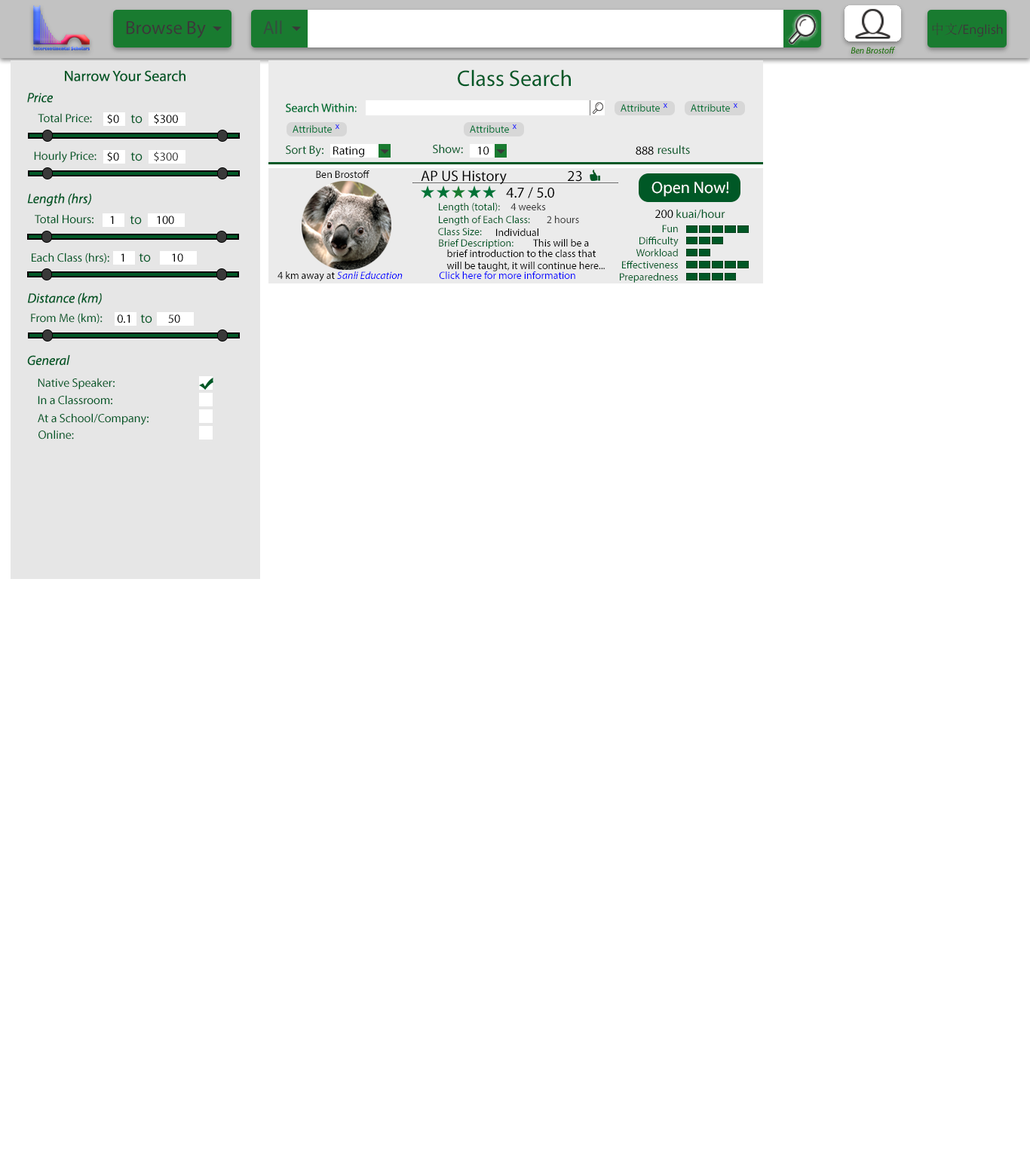
<style>
.page{position:relative;width:1030px;height:1158px;background:#ffffff}
.page>*{position:absolute;margin:0}
.t1{font:18.8px "MyriadPro-Regular";color:#393939}
.t2{font:18.8px "MyriadPro-Regular";color:#334d3e}
.t3{font:13.6px "MyriadPro-Regular";color:#393939}
.t4{font:13.6px "SimSun";color:#393939}
.t5{font:9px "MyriadPro-It";color:#126b00}
.t6{font:15.1px "MyriadPro-Regular";color:#005826}
.t7{font:22.6px "MyriadPro-Regular";color:#005826}
.t8{font:13.6px "MyriadPro-It";color:#005826}
.t9{font:12.1px "MyriadPro-Regular";color:#005826}
.t10{font:12.1px "MyriadPro-Regular";color:#000000}
.t11{font:12.1px "MyriadPro-Regular";color:#007236}
.t12{font:10.6px "MyriadPro-Regular";color:#007236}
.t13{font:9px "MyriadPro-Regular"}
.t14{font:13.6px "MyriadPro-Regular";color:#005826}
.t15{font:12.1px "MyriadPro-Regular";color:#393939}
.t16{font:10.6px "MyriadPro-Regular";color:#000000}
.t17{font:15.1px "MyriadPro-Regular";color:#000000}
.t18{font:16.6px "MyriadPro-Regular";color:#ffffff}
.t19{font:10.6px "MyriadPro-Regular";color:#005826}
.t20{font:10.6px "MyriadPro-Regular";color:#393939}
.t21{font:10.6px "MyriadPro-It";color:#0000ff}
.t22{font:10.6px "MyriadPro-Regular";color:#0000ff}
</style>
<div class="page">
<p class="t1" style="left:126px;top:21px;width:80px;height:17px">Browse By</p>
<p class="t2" style="left:263px;top:20px;width:19px;height:14px">All</p>
<p class="t3" style="left:932px;top:23px;width:71px;height:14px"><span class="t4">中文</span>/English</p>
<p class="t5" style="left:850px;top:47px;width:46px;height:7px">Ben Brostoff</p>
<p class="t6" style="left:65px;top:70px;width:120px;height:11px">Narrow Your Search</p>
<p class="t7" style="left:458px;top:69px;width:113px;height:18px">Class Search</p>
<p class="t8" style="left:27px;top:93px;width:26px;height:10px">Price</p>
<p class="t9" style="left:38px;top:113px;width:54px;height:10px">Total Price:</p>
<p class="t10" style="left:107px;top:114px;width:12px;height:10px">$0</p>
<p class="t10" style="left:154px;top:114px;width:24px;height:10px">$300</p>
<p class="t11" style="left:286px;top:103px;width:71px;height:9px">Search Within:</p>
<p class="t12" style="left:620px;top:104px;width:40px;height:8px">Attribute</p>
<p class="t13" style="left:663px;top:103px;width:4px;height:5px">x</p>
<p class="t12" style="left:691px;top:104px;width:39px;height:8px">Attribute</p>
<p class="t13" style="left:733px;top:103px;width:4px;height:5px">x</p>
<p class="t14" style="left:130px;top:115px;width:12px;height:9px">to</p>
<p class="t12" style="left:293px;top:125px;width:39px;height:8px">Attribute</p>
<p class="t13" style="left:335px;top:124px;width:4px;height:5px">x</p>
<p class="t12" style="left:470px;top:125px;width:39px;height:8px">Attribute</p>
<p class="t13" style="left:512px;top:124px;width:4px;height:5px">x</p>
<p class="t9" style="left:286px;top:145px;width:37px;height:12px">Sort By:</p>
<p class="t10" style="left:333px;top:146px;width:31px;height:12px">Rating</p>
<p class="t9" style="left:433px;top:144px;width:30px;height:10px">Show:</p>
<p class="t10" style="left:478px;top:146px;width:11px;height:9px">10</p>
<p class="t10" style="left:636px;top:146px;width:18px;height:9px">888</p>
<p class="t9" style="left:657px;top:145px;width:33px;height:10px">results</p>
<p class="t9" style="left:34px;top:151px;width:62px;height:12px">Hourly Price:</p>
<p class="t10" style="left:107px;top:152px;width:12px;height:10px">$0</p>
<p class="t14" style="left:130px;top:152px;width:12px;height:9px">to</p>
<p class="t15" style="left:154px;top:152px;width:24px;height:10px">$300</p>
<p class="t16" style="left:316px;top:170px;width:53px;height:8px">Ben Brostoff</p>
<p class="t17" style="left:421px;top:170px;width:86px;height:15px">AP US History</p>
<p class="t17" style="left:568px;top:170px;width:14px;height:12px">23</p>
<p class="t18" style="left:651px;top:182px;width:77px;height:15px">Open Now!</p>
<p class="t8" style="left:27px;top:193px;width:64px;height:14px">Length (hrs)</p>
<p class="t17" style="left:506px;top:187px;width:48px;height:11px">4.7 / 5.0</p>
<p class="t19" style="left:439px;top:203px;width:61px;height:10px">Length (total):</p>
<p class="t20" style="left:510px;top:203px;width:36px;height:7px">4 weeks</p>
<p class="t9" style="left:655px;top:209px;width:70px;height:10px"><span class="t10">200 </span>kuai/hour</p>
<p class="t9" style="left:35px;top:214px;width:58px;height:10px">Total Hours:</p>
<p class="t10" style="left:110px;top:216px;width:4px;height:8px">1</p>
<p class="t14" style="left:130px;top:216px;width:12px;height:9px">to</p>
<p class="t10" style="left:157px;top:216px;width:17px;height:9px">100</p>
<p class="t19" style="left:439px;top:216px;width:91px;height:9px">Length of Each Class:</p>
<p class="t20" style="left:547px;top:216px;width:32px;height:7px">2 hours</p>
<p class="t19" style="left:438px;top:228px;width:44px;height:7px">Class Size:</p>
<p class="t16" style="left:496px;top:228px;width:42px;height:8px">Individual</p>
<p class="t19" style="left:620px;top:225px;width:58px;height:58px;text-align:right">Fun<br>Difficulty<br>Workload<br>Effectiveness<br>Preparedness</p>
<p class="t19" style="left:439px;top:239px;width:74px;height:10px">Brief Description:</p>
<p class="t16" style="left:533px;top:239px;width:56px;height:8px">This will be a</p>
<p class="t9" style="left:32px;top:253px;width:77px;height:10px">Each Class (hrs):</p>
<p class="t10" style="left:121px;top:253px;width:3px;height:9px">1</p>
<p class="t14" style="left:139px;top:253px;width:12px;height:9px">to</p>
<p class="t10" style="left:172px;top:253px;width:11px;height:9px">10</p>
<p class="t16" style="left:446px;top:250px;width:159px;height:21px">brief introduction to the class that<br>will be taught, it will continue here...</p>
<p class="t21" style="left:277px;top:271px;width:126px;height:10px"><span class="t16">4 km away at </span>Sanli Education</p>
<p class="t22" style="left:439px;top:271px;width:136px;height:8px">Click here for more information</p>
<p class="t8" style="left:27px;top:293px;width:75px;height:12px">Distance (km)</p>
<p class="t9" style="left:31px;top:313px;width:72px;height:10px">From Me (km):</p>
<p class="t10" style="left:117px;top:314px;width:13px;height:9px">0.1</p>
<p class="t14" style="left:140px;top:314px;width:12px;height:9px">to</p>
<p class="t10" style="left:168px;top:314px;width:12px;height:9px">50</p>
<p class="t8" style="left:27px;top:355px;width:43px;height:11px">General</p>
<p class="t9" style="left:38px;top:378px;width:77px;height:12px">Native Speaker:</p>
<p class="t9" style="left:38px;top:395px;width:74px;height:10px">In a Classroom:</p>
<p class="t9" style="left:38px;top:413px;width:111px;height:12px">At a School/Company:</p>
<p class="t9" style="left:38px;top:430px;width:36px;height:10px">Online:</p>
</div>
